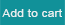
<style>
.page{position:relative;width:65px;height:25px;background:#119199}
.page>*{position:absolute;margin:0}
.t1{font:18.2px "ArialMT";letter-spacing:0.02em;color:#e8f1f2;scale:1.12 1}
</style>
<div class="page">
<p class="t1" style="left:2px;top:9px;width:60px;height:8px">Add to cart</p>
</div>
